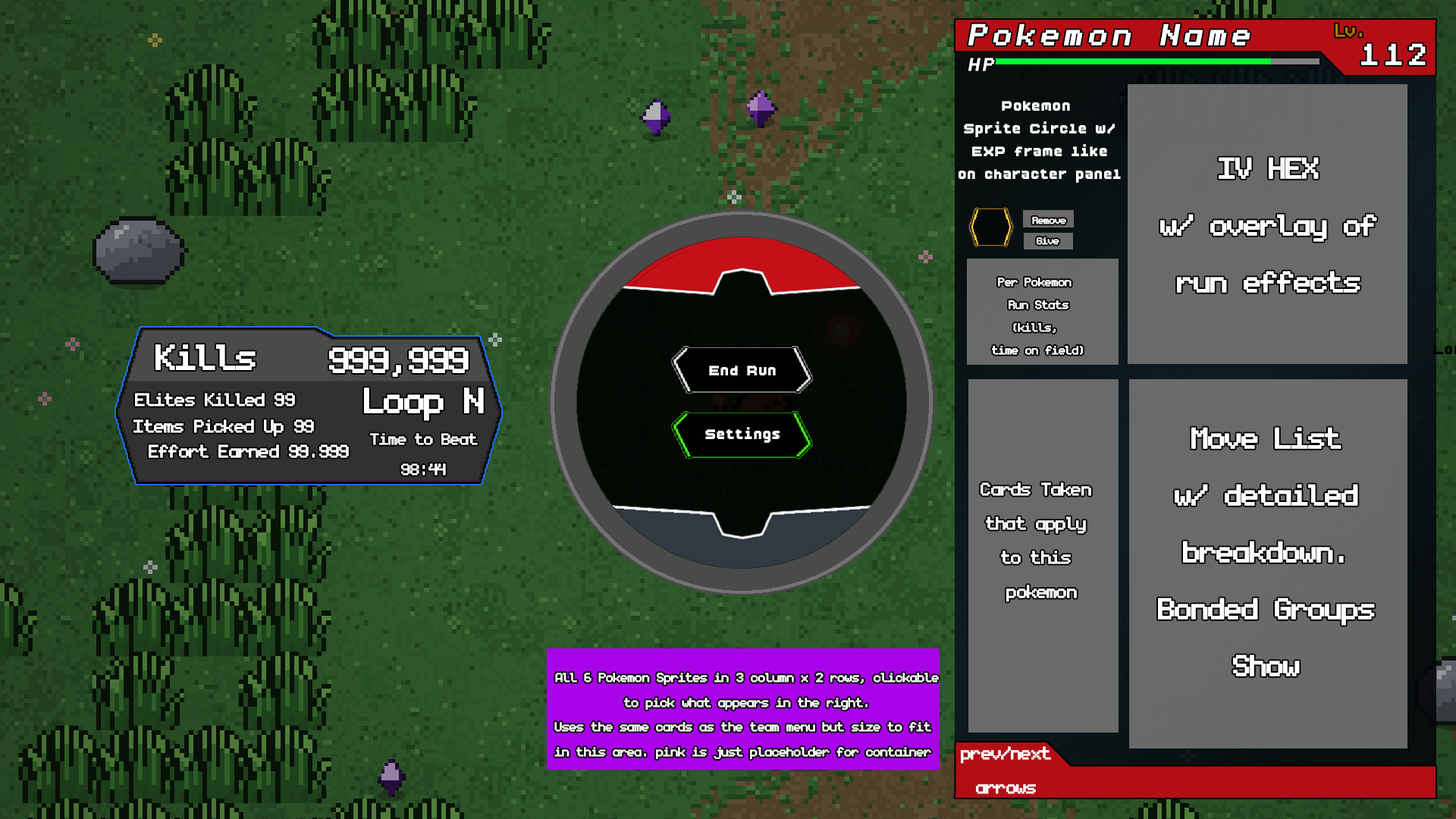
<style>
.page{position:relative;width:1456px;height:819px}
.page>*{position:absolute;margin:0}
.t1{font:47.4px "monogram";letter-spacing:0.1em;color:#ffffff;font-weight:bold;font-style:italic}
.t2{font:28.4px "monogram";letter-spacing:-0.05em;color:#aa7c00;font-weight:bold}
.t3{font:47.4px "monogram";letter-spacing:0.1em;color:#ffffff;font-weight:bold}
.t4{font:28.4px "monogram";letter-spacing:0.1em;color:#ffffff;font-weight:bold;font-style:italic}
.t5{font:19px "BoldPixels";letter-spacing:0.05em;color:#ffffff}
.t6{font:47.4px "monogram";letter-spacing:-0.05em;color:#ffffff;font-weight:bold}
.t7{font:15.8px "monogram";letter-spacing:-0.05em;color:#ffffff;font-weight:bold}
.t8{font:19px "monogram";letter-spacing:-0.05em;color:#ffffff;font-weight:bold}
.t9{font:56.9px "monogram";letter-spacing:-0.05em;color:#ffffff;font-weight:bold}
.t10{font:28.4px "monogram";letter-spacing:-0.05em;color:#ffffff;font-weight:bold}
.t11{font:25.3px "monogram";letter-spacing:-0.05em;color:#ffffff;font-weight:bold}
.t12{font:20.5px "monogram";letter-spacing:-0.05em;color:#ffffff;font-weight:bold}
</style>
<div class="page">
<p class="t1" style="left:968px;top:24px;width:282px;height:21px">Pokemon Name</p>
<p class="t2" style="left:1335px;top:24px;width:27px;height:13px">Lv.</p>
<p class="t3" style="left:1361px;top:43px;width:65px;height:22px">112</p>
<p class="t4" style="left:968px;top:58px;width:27px;height:13px">HP</p>
<p class="t5" style="left:959px;top:101px;width:162px;height:82px;text-align:center">Pokemon <br>Sprite Circle w/<br>EXP frame like<br>on character panel</p>
<p class="t6" style="left:1160px;top:157px;width:217px;height:136px;text-align:center">IV HEX<br>w/ overlay of<br>run effects</p>
<p class="t7" style="left:1032px;top:216px;width:34px;height:8px">Remove</p>
<p class="t7" style="left:1036px;top:237px;width:23px;height:8px">Give</p>
<p class="t8" style="left:992px;top:278px;width:91px;height:77px;text-align:center">Per Pokemon <br>Run Stats<br>(kills, <br>time on field)</p>
<p class="t9" style="left:155px;top:344px;width:101px;height:26px">Kills</p>
<p class="t9" style="left:329px;top:347px;width:140px;height:30px">999,999</p>
<p class="t5" style="left:709px;top:366px;width:67px;height:9px">End Run</p>
<p class="t9" style="left:364px;top:388px;width:120px;height:33px">Loop N</p>
<p class="t10" style="left:135px;top:393px;width:160px;height:13px">Elites Killed 99</p>
<p class="t10" style="left:133px;top:419px;width:181px;height:18px">Items Picked Up 99</p>
<p class="t11" style="left:370px;top:433px;width:108px;height:42px;text-align:center">Time to Beat<br>98:44</p>
<p class="t5" style="left:705px;top:427px;width:75px;height:16px">Settings</p>
<p class="t6" style="left:1158px;top:427px;width:217px;height:249px;text-align:center">Move List<br>w/ detailed<br>breakdown.<br>Bonded Groups<br>Show</p>
<p class="t10" style="left:149px;top:444px;width:200px;height:14px">Effort Earned 99.999</p>
<p class="t10" style="left:981px;top:482px;width:110px;height:120px;text-align:center">Cards Taken <br>that apply <br>to this <br>pokemon</p>
<p class="t12" style="left:554px;top:673px;width:385px;height:86px;text-align:center">All 6 Pokemon Sprites in 3 column x 2 rows, clickable<br>to pick what appears in the right.<br>Uses the same cards as the team menu but size to fit <br>in this area. pink is just placeholder for container</p>
<p class="t10" style="left:961px;top:746px;width:90px;height:48px;text-align:center">prev/next<br>arrows</p>
</div>
